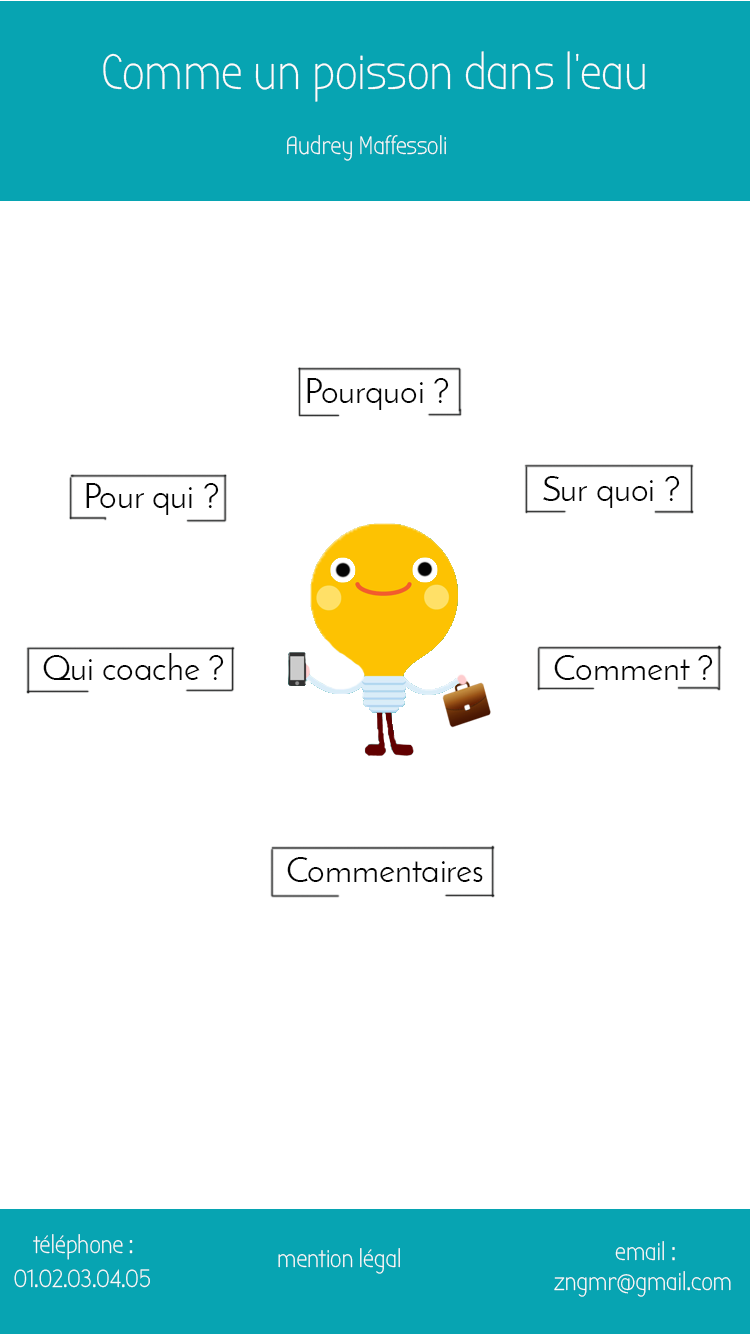
<style>
.page{position:relative;width:750px;height:1334px;background:#ffffff}
.page>*{position:absolute;margin:0}
.t1{font:50px "BubblerOne";color:#fdfcfc}
.t2{font:25px "BubblerOne";color:#fdfcfc}
.t3{font:35px "JosefinSans";color:#040404}
</style>
<div class="page">
<p class="t1" style="left:103px;top:51px;width:542px;height:51px">Comme un poisson dans l’eau</p>
<p class="t2" style="left:287px;top:135px;width:159px;height:26px">Audrey Maffessoli</p>
<p class="t3" style="left:307px;top:378px;width:142px;height:32px">Pourquoi ?</p>
<p class="t3" style="left:86px;top:483px;width:133px;height:32px">Pour qui ?</p>
<p class="t3" style="left:543px;top:476px;width:137px;height:32px">Sur quoi ?</p>
<p class="t3" style="left:43px;top:653px;width:181px;height:27px">Qui coache ?</p>
<p class="t3" style="left:554px;top:655px;width:159px;height:25px">Comment ?</p>
<p class="t3" style="left:287px;top:857px;width:196px;height:25px">Commentaires</p>
<p class="t2" style="left:33px;top:1234px;width:100px;height:26px">téléphone :</p>
<p class="t2" style="left:615px;top:1241px;width:60px;height:20px">email :</p>
<p class="t2" style="left:278px;top:1248px;width:122px;height:26px">mention légal</p>
<p class="t2" style="left:14px;top:1269px;width:136px;height:19px">01.02.03.04.05</p>
<p class="t2" style="left:554px;top:1271px;width:177px;height:26px">zngmr@gmail.com</p>
</div>
